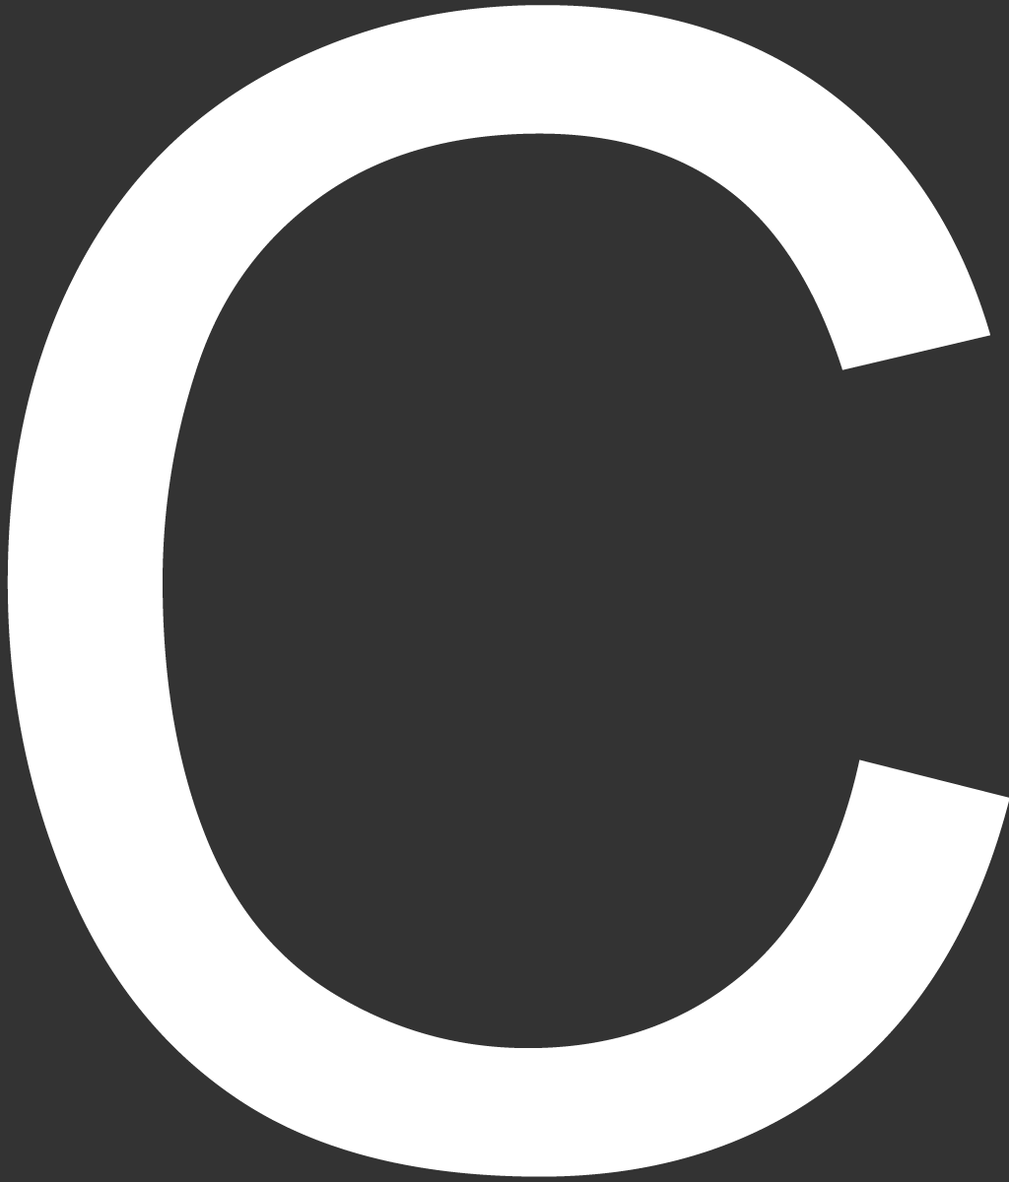
<style>
.page{position:relative;width:1009px;height:1182px;background:#333333}
.page>*{position:absolute;margin:0}
.t1{font:1582.5px "ArialMT";color:#ffffff}
</style>
<div class="page">
<p class="t1" style="left:7px;top:5px;width:1003px;height:1172px">C</p>
</div>
